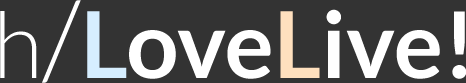
<style>
.page{position:relative;width:466px;height:83px;background:#333333}
.page>*{position:absolute;margin:0}
.t1{font:91.9px "Lato-Bold";color:#ffffff}
.t2{font:91.9px "Lato-Light";color:#ffffff}
.t3{font:106.9px "Lato-Light";color:#ffffff}
.t4{font:91.9px "Lato-Bold";color:#d6eeff}
.t5{font:91.9px "Lato-Bold";color:#ffe0be}
</style>
<div class="page">
<p class="t1" style="left:0px;top:0px;width:467px;height:83px"><span class="t2">h</span><span class="t3">/</span><span class="t4">L</span>ove<span class="t5">L</span>ive!</p>
</div>
